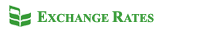
<style>
.page{position:relative;width:200px;height:30px;background:#ffffff}
.page>*{position:absolute;margin:0}
.t1{font:12px "TimesNewRomanPS-BoldMT";color:#399d39}
.t2{font:16px "TimesNewRomanPS-BoldMT";color:#399d39}
</style>
<div class="page">
<p class="t1" style="left:37px;top:11px;width:117px;height:12px"><span class="t2">E</span>XCHANGE <span class="t2">R</span>ATES</p>
</div>
